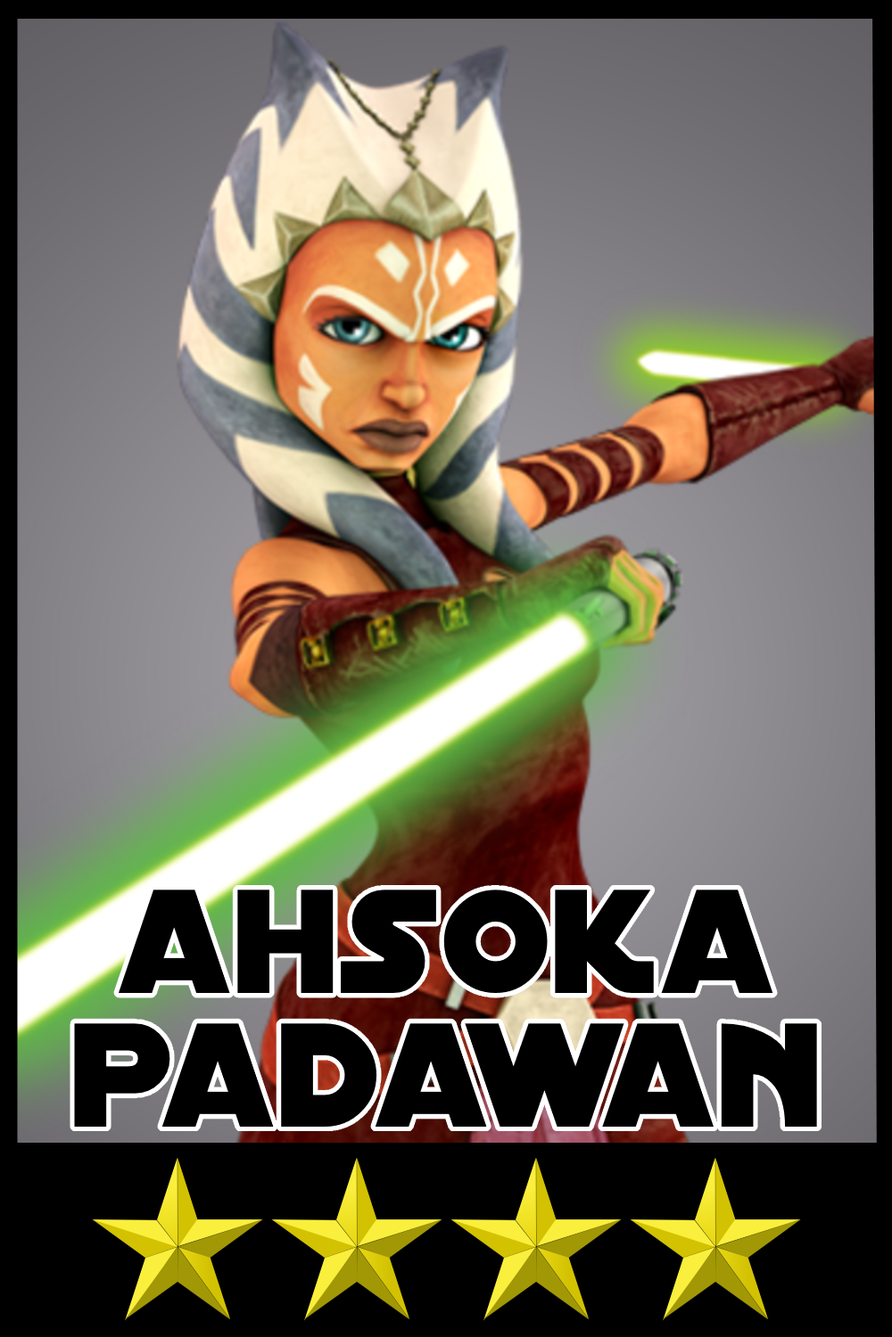
<style>
.page{position:relative;width:892px;height:1337px;background:#000000}
.page>*{position:absolute;margin:0}
.t1{font:158.7px/133.7px "DistantGalaxy";color:#000000}
</style>
<div class="page">
<p class="t1" style="left:74px;top:890px;width:743px;height:237px;text-align:center">ahsoka<br>padawan</p>
</div>
